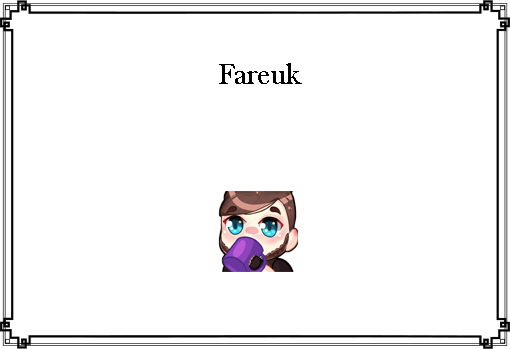
<style>
.page{position:relative;width:510px;height:349px;background:#ffffff}
.page>*{position:absolute;margin:0}
.t1{font:30px "BaskOldFace";color:#000000}
</style>
<div class="page">
<p class="t1" style="left:219px;top:63px;width:83px;height:21px">Fareuk</p>
</div>
